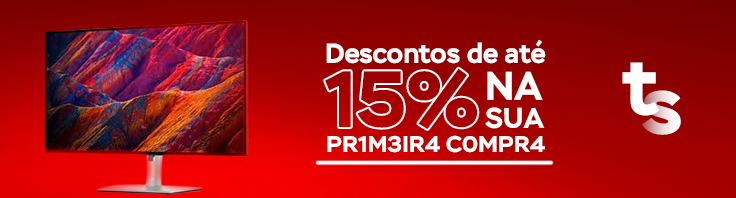
<style>
.page{position:relative;width:736px;height:198px}
.page>*{position:absolute;margin:0}
.t1{font:27.9px "Stem-Bold";color:#ffffff}
.t2{font:82px "Stem-Bold";color:#ffffff}
.t3{font:79.4px "Stem-Bold";color:#a30000}
.t4{font:40.1px "Stem-Bold";color:#ffffff}
.t5{font:82px "Stem-Bold"}
.t6{font:28.6px "Stem-Bold";color:#ffffff}
.t7{font:22.7px "Stem-Bold";color:#ffffff;scale:1.03 1}
</style>
<div class="page">
<p class="t1" style="left:326px;top:39px;width:220px;height:25px">Descontos de até</p>
<p class="t2" style="left:622px;top:62px;width:38px;height:54px">t</p>
<p class="t3" style="left:325px;top:68px;width:153px;height:61px">15%</p>
<p class="t4" style="left:487px;top:71px;width:56px;height:29px">NA</p>
<p class="t5" style="left:642px;top:90px;width:39px;height:45px">s</p>
<p class="t6" style="left:485px;top:107px;width:60px;height:22px;rotate:-1deg">SUA</p>
<p class="t7" style="left:327px;top:135px;width:218px;height:18px">PR1M3IR4 C0MPR4</p>
</div>
